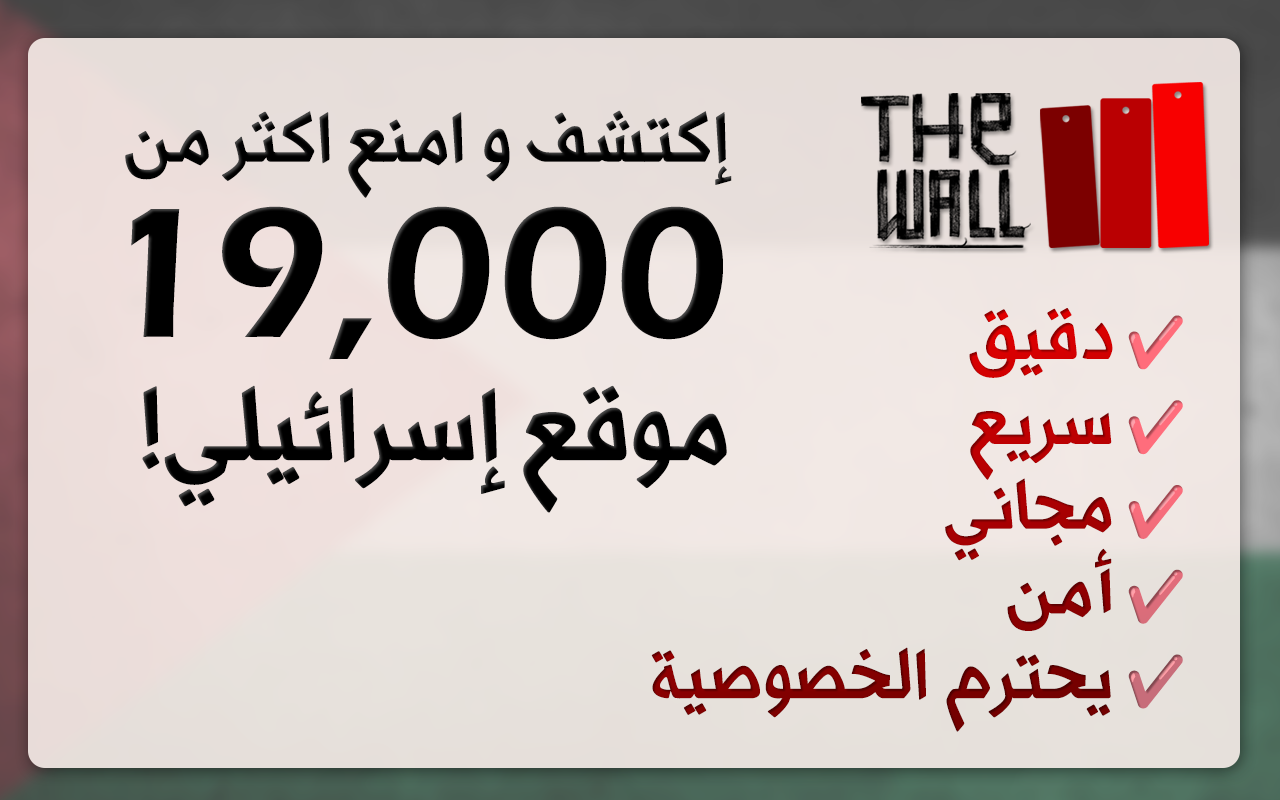
<style>
.page{position:relative;width:1280px;height:800px}
.page>*{position:absolute;margin:0}
.t1{font:70.9px "Watad-Regular";color:#000000}
.t2{font:70.9px "MyriadArabic-Regular";color:#000000}
.t3{font:191.7px/175px "ErasITC-Demi";color:#000000}
.t4{font:102.8px "Watad-Regular";color:#000000}
.t5{font:70.6px "Watad-Regular"}
.t6{font:48.9px "NotoColorEmoji-SVG"}
</style>
<div class="page">
<p class="t1" style="left:125px;top:110px;width:607px;height:403px">إكتشف و امنع اكثر <span class="t2">‫</span>من<br><span class="t3">19,000 <br></span><span class="t4">موقع إسرائيلي!</span></p>
<p class="t5" style="left:651px;top:308px;width:532px;height:424px"><span class="t6">✔️ </span>دقيق<br><span class="t6">✔️ </span>سريع<br><span class="t6">✔️ </span>مجاني<br><span class="t6">✔️ </span>أمن<br><span class="t6">✔️ </span>يحترم الخصوصية</p>
</div>
